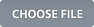
<style>
.page{position:relative;width:94px;height:27px;background:#858f99}
.page>*{position:absolute;margin:0}
.t1{font:12px "MyriadPro-Semibold";letter-spacing:0.02em;color:#ffffff}
</style>
<div class="page">
<p class="t1" style="left:12px;top:9px;width:71px;height:10px">CHOOSE FILE</p>
</div>
